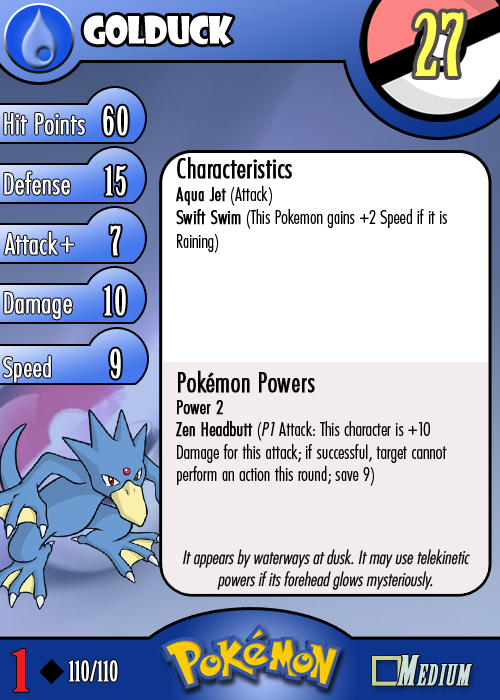
<style>
.page{position:relative;width:500px;height:700px;background:#ffffff}
.page>*{position:absolute;margin:0}
.t1{font:36.7px "ShowcardGothic-Reg";letter-spacing:-0.025em;color:#ffffff;scale:0.91 1}
.t2{font:83.3px "BirchStd";letter-spacing:0.025em;color:#fffd59;font-weight:bold}
.t3{font:27.8px "Futura-CondensedLight";color:#ffffff;font-weight:bold}
.t4{font:38.9px "BirchStd";letter-spacing:0.035em;color:#ffffff;font-weight:bold}
.t5{font:19.4px/22.2px "FuturaCondensedBQ-Light";color:#010101}
.t6{font:27.8px "FuturaCondensedBQ-Light";color:#010101;font-weight:bold}
.t7{font:19.4px "FuturaCondensedBQ-Light";color:#010101;font-weight:bold}
.t8{font:19.4px "FuturaCondensedBQ-Light";color:#010101}
.t9{font:27.8px/28.9px "FuturaCondensedBQ-Light";color:#010101;font-weight:bold}
.t10{font:19.4px/22.2px "FuturaCondensedBQ-Light";color:#010101;font-weight:bold}
.t11{font:19.4px/22.2px "FuturaCondensedBQ-Light";color:#010101;font-style:italic}
.t12{font:30.6px "Futura-CondensedLight";color:#ffffff;font-weight:bold}
.t13{font:27.8px "FuturaCondensedBQ-Light";color:#ffffff;font-weight:bold}
.t14{font:18.1px "Futura-CondensedLight";color:#010101;font-style:italic}
.t15{font:55.6px "BirchStd";color:#ed1c24;font-weight:bold;scale:1.5 1}
.t16{font:27.8px "BirchStd";color:#ffffff;font-weight:bold}
</style>
<div class="page">
<p class="t1" style="left:83px;top:15px;width:150px;height:30px">golduck</p>
<p class="t2" style="left:415px;top:12px;width:49px;height:64px">27</p>
<p class="t3" style="left:4px;top:113px;width:81px;height:22px">Hit Points</p>
<p class="t4" style="left:103px;top:105px;width:25px;height:31px">60</p>
<p class="t5" style="left:176px;top:157px;width:271px;height:329px"><span class="t6">Characteristics<br></span><span class="t7">Aqua Jet</span><span class="t8"> (Attack)<br></span><span class="t7">Swift Swim</span><span class="t8"> (This Pokemon gains +2 Speed if it is Raining)<br></span><span class="t9"><br><br><br><br>Pokémon Powers<br></span><span class="t10">Power 2<br>Zen Headbutt</span> (<span class="t11">P1</span> Attack: This character is +10 Damage for this attack; if successful, target cannot perform an action this round; save 9)</p>
<p class="t3" style="left:4px;top:171px;width:66px;height:24px">Defense</p>
<p class="t4" style="left:105px;top:165px;width:21px;height:31px">15</p>
<p class="t3" style="left:4px;top:231px;width:54px;height:24px">Attack</p>
<p class="t4" style="left:110px;top:225px;width:11px;height:31px">7</p>
<p class="t12" style="left:60px;top:236px;width:14px;height:17px">+</p>
<p class="t3" style="left:4px;top:292px;width:68px;height:28px">Damage</p>
<p class="t4" style="left:104px;top:285px;width:22px;height:31px">10</p>
<p class="t4" style="left:110px;top:348px;width:11px;height:31px">9</p>
<p class="t13" style="left:3px;top:355px;width:48px;height:28px">Speed</p>
<p class="t14" style="left:183px;top:549px;width:287px;height:41px;text-align:center">It appears by waterways at dusk. It may use telekinetic powers if its forehead glows mysteriously.</p>
<p class="t15" style="left:12px;top:649px;width:17px;height:43px">1</p>
<p class="t16" style="left:68px;top:660px;width:50px;height:22px">110/110</p>
</div>
